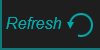
<style>
.page{position:relative;width:100px;height:50px;background:#1e1e1e}
.page>*{position:absolute;margin:0}
.t1{font:16px "Arial-ItalicMT";color:#00abae}
</style>
<div class="page">
<p class="t1" style="left:6px;top:17px;width:56px;height:12px">Refresh</p>
</div>
